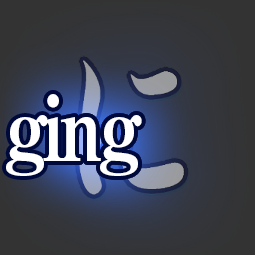
<style>
.page{position:relative;width:255px;height:255px}
.page>*{position:absolute;margin:0}
.t1{font:90px "RyuminPro-ExBold";letter-spacing:-0.08em;color:#ffffff;scale:0.85 1}
</style>
<div class="page">
<p class="t1" style="left:6px;top:94px;width:136px;height:82px">ging</p>
<p class="t1" style="left:43px;top:94px;width:99px;height:82px">ing</p>
</div>
